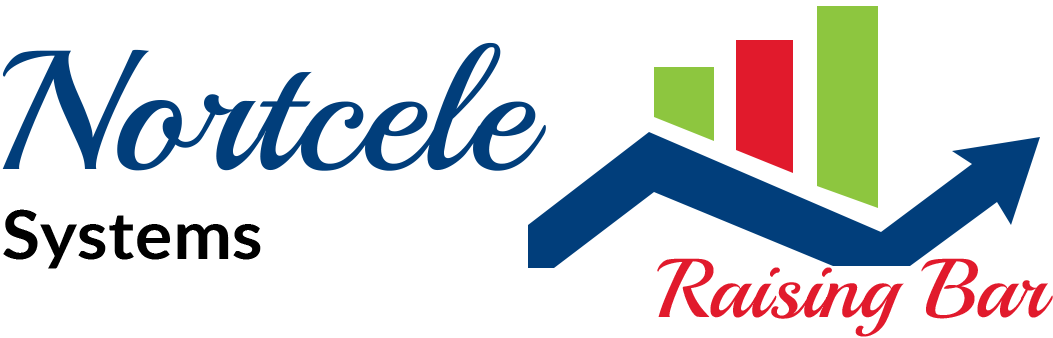
<style>
.page{position:relative;width:1053px;height:338px;background:#ffffff}
.page>*{position:absolute;margin:0}
.t1{font:169.4px "Playball-Regular";color:#013e7b;scale:1.05 1}
.t2{font:66.7px "Lato-Bold";color:#000000;scale:1.05 1}
.t3{font:83.3px "Playball-Regular";color:#e11a2c;scale:1.05 1}
</style>
<div class="page">
<p class="t1" style="left:2px;top:42px;width:544px;height:129px">Nortcele</p>
<p class="t2" style="left:3px;top:209px;width:258px;height:60px">Systems</p>
<p class="t3" style="left:657px;top:258px;width:396px;height:79px">Raising Bar</p>
</div>
